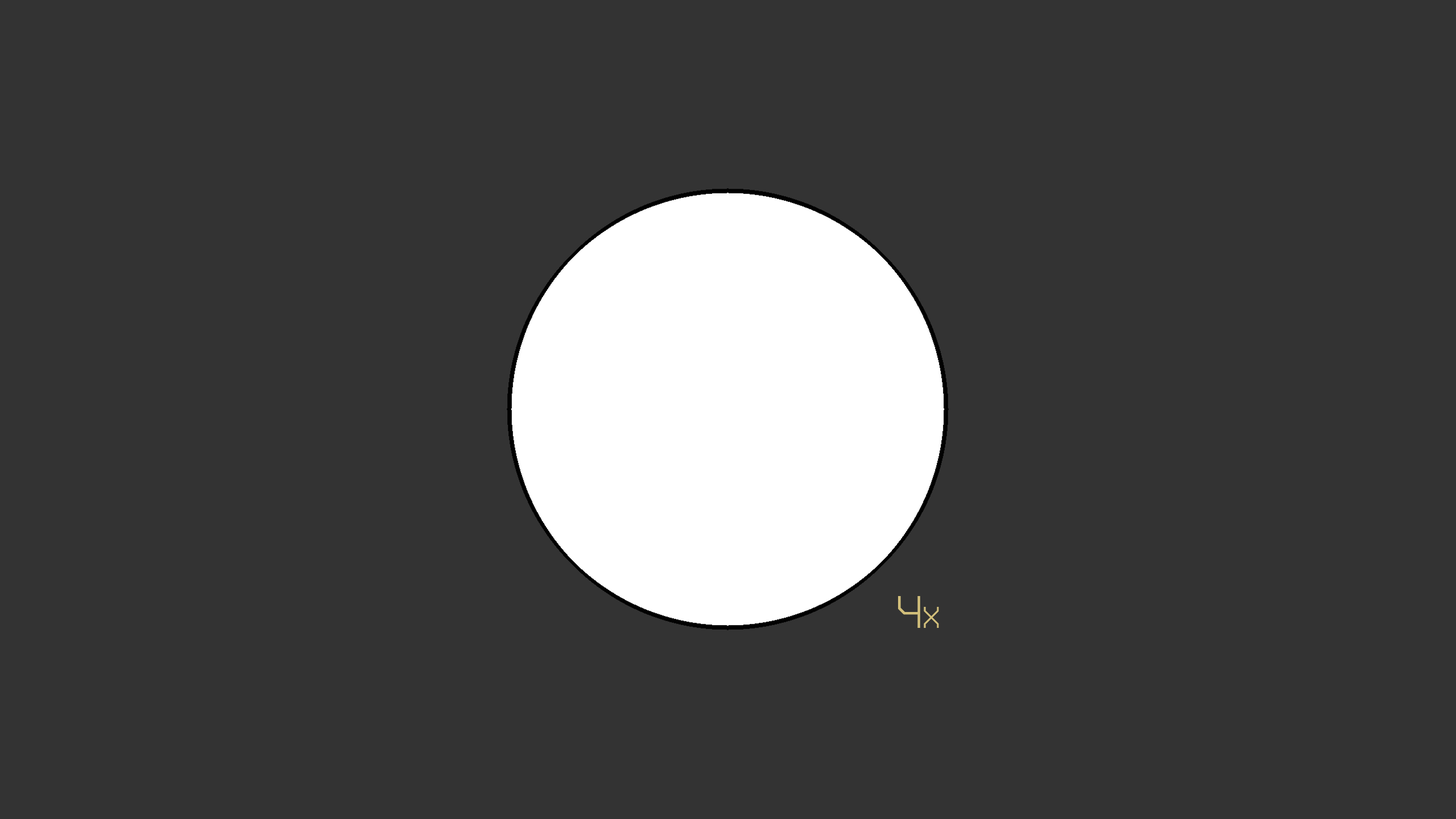
<style>
.page{position:relative;width:1456px;height:819px;background:#333333}
.page>*{position:absolute;margin:0}
.t1{font:45.5px "Arame-Thin";color:#d2bf7a}
.t2{font:30.1px "Arame-Thin";color:#d2bf7a}
</style>
<div class="page">
<p class="t1" style="left:898px;top:596px;width:41px;height:32px">4<span class="t2">x</span></p>
</div>
